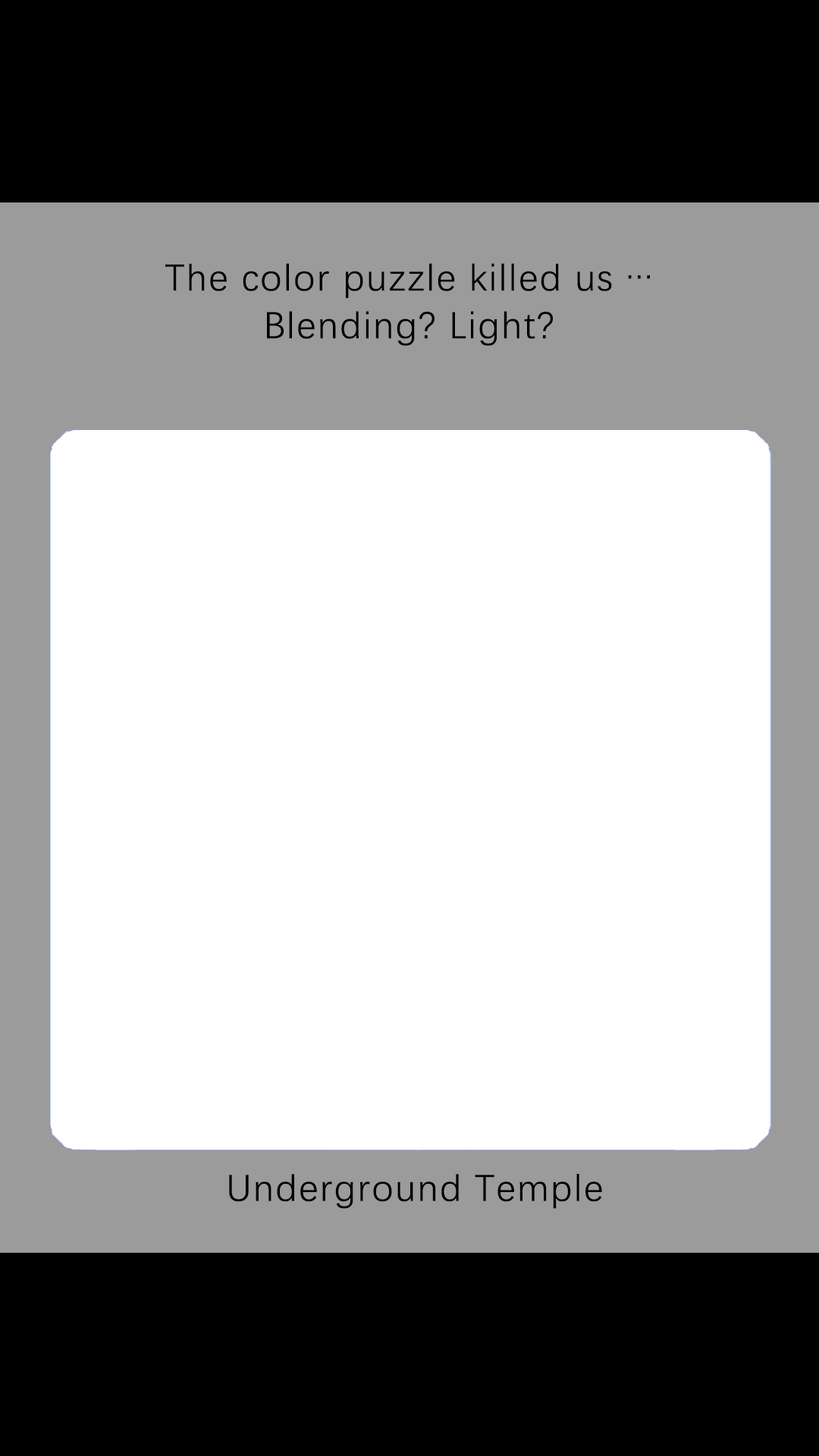
<style>
.page{position:relative;width:819px;height:1456px;background:#ffffff}
.page>*{position:absolute;margin:0}
.t1{font:37.9px/47.6px "DengXian-Regular";letter-spacing:0.04em;color:#000000}
.t2{font:37.9px "DengXian-Regular";letter-spacing:0.04em;color:#000000}
</style>
<div class="page">
<p class="t1" style="left:165px;top:263px;width:485px;height:83px;text-align:center">The color puzzle killed us …<br>Blending? Light?</p>
<p class="t2" style="left:229px;top:1174px;width:373px;height:35px">Underground Temple</p>
</div>
